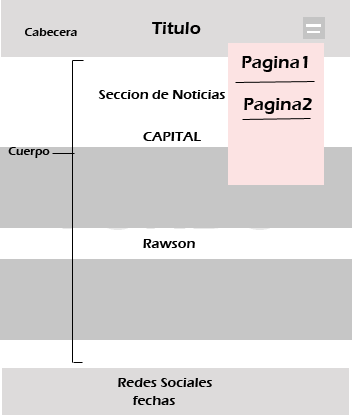
<style>
.page{position:relative;width:352px;height:416px;background:#c6c6c6}
.page>*{position:absolute;margin:0}
.t1{font:12px "ErasITC-Demi";color:#000000}
.t2{font:18px "ErasITC-Demi";color:#000000}
.t3{font:14px "ErasITC-Demi";color:#000000}
</style>
<div class="page">
<p class="t1" style="left:25px;top:28px;width:52px;height:8px">Cabecera</p>
<p class="t2" style="left:152px;top:22px;width:49px;height:12px">Titulo</p>
<p class="t2" style="left:242px;top:56px;width:66px;height:16px">Pagina1</p>
<p class="t3" style="left:98px;top:90px;width:127px;height:9px">Seccion de Noticias</p>
<p class="t2" style="left:244px;top:98px;width:68px;height:16px">Pagina2</p>
<p class="t3" style="left:143px;top:132px;width:58px;height:9px">CAPITAL</p>
<p class="t1" style="left:8px;top:147px;width:42px;height:11px">Cuerpo</p>
<p class="t3" style="left:143px;top:239px;width:52px;height:9px">Rawson</p>
<p class="t3" style="left:118px;top:378px;width:94px;height:9px">Redes Sociales</p>
<p class="t3" style="left:133px;top:396px;width:42px;height:9px">fechas</p>
</div>
